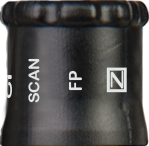
<style>
.page{position:relative;width:149px;height:146px}
.page>*{position:absolute;margin:0}
.t1{font:14.7px "ArialRoundedMTBold";letter-spacing:-0.01em;color:#e1e4e3;scale:1.09 1}
.t2{font:32.5px "ArialRoundedMTBold";letter-spacing:-0.01em;color:#e1e4e3;scale:0.36 1}
.t3{font:17.9px "ArialRoundedMTBold";letter-spacing:-0.01em;color:#e1e4e3;scale:0.89 1}
.t4{font:17.4px "ArialRoundedMTBold";letter-spacing:-0.01em;color:#e1e4e3;scale:1.65 1}
</style>
<div class="page">
<p class="t1" style="left:28px;top:58px;width:12px;height:45px;rotate:-90deg">SCAN</p>
<p class="t2" style="left:5px;top:75px;width:7px;height:23px">5</p>
<p class="t3" style="left:68px;top:70px;width:14px;height:21px;rotate:-90deg">FP</p>
<p class="t4" style="left:110px;top:70px;width:14px;height:19px;rotate:-90deg">Z</p>
</div>
